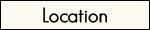
<style>
.page{position:relative;width:150px;height:30px;background:#fffaf0}
.page>*{position:absolute;margin:0}
.t1{font:20px "GeosansLight";color:#000000;font-weight:bold}
</style>
<div class="page">
<p class="t1" style="left:43px;top:7px;width:64px;height:16px">Location</p>
</div>
